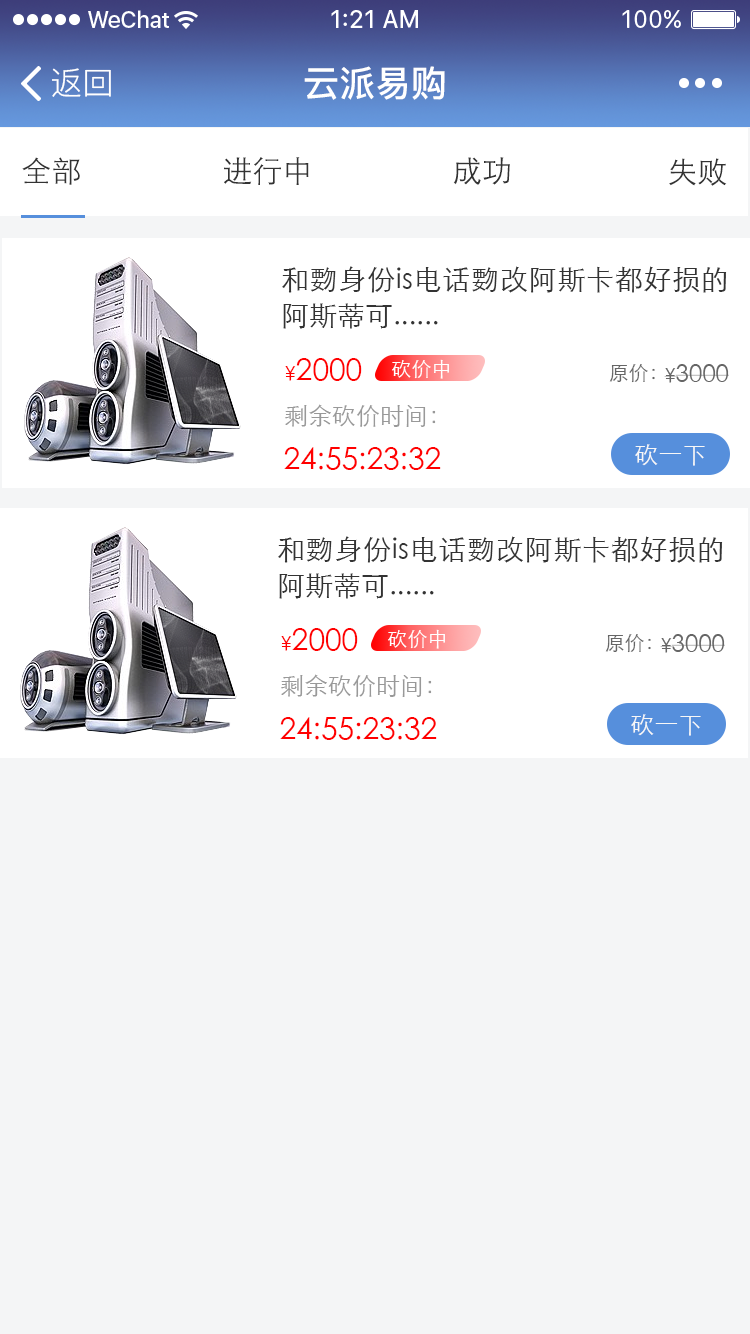
<style>
.page{position:relative;width:750px;height:1334px;background:#f4f5f6}
.page>*{position:absolute;margin:0}
.t1{font:32px "PingFang-SC-Regular";color:#ffffff}
.t2{font:36px "PingFang-SC-Bold";color:#ffffff}
.t3{font:30px "STXihei";color:#333333}
.t4{font:28px/36px "STXihei";color:#333333}
.t5{font:30px "STXihei";color:#ff0000}
.t6{font:20px "STXihei";color:#ff0000}
.t7{font:20px "STXihei";color:#ffffff}
.t8{font:20px "STXihei";color:#666666}
.t9{font:24px "STXihei";color:#666666}
.t10{font:24px "STXihei";color:#999999}
.t11{font:24px "STXihei";color:#f7f7f7}
</style>
<div class="page">
<p class="t1" style="left:52px;top:68px;width:59px;height:29px">返回</p>
<p class="t2" style="left:304px;top:66px;width:141px;height:34px">云派易购</p>
<p class="t3" style="left:22px;top:157px;width:58px;height:28px">全部</p>
<p class="t3" style="left:224px;top:157px;width:85px;height:28px">进行中</p>
<p class="t3" style="left:453px;top:157px;width:57px;height:28px">成功</p>
<p class="t3" style="left:669px;top:158px;width:58px;height:28px">失败</p>
<p class="t4" style="left:282px;top:266px;width:445px;height:63px;text-align:justify">和覅身份is电话覅改阿斯卡都好损的阿斯蒂可......</p>
<p class="t5" style="left:285px;top:358px;width:77px;height:23px"><span class="t6">¥</span>2000</p>
<p class="t7" style="left:392px;top:359px;width:57px;height:20px">砍价中</p>
<p class="t8" style="left:609px;top:364px;width:46px;height:19px">原价：</p>
<p class="t9" style="left:664px;top:364px;width:65px;height:19px"><span class="t8">¥</span>3000</p>
<p class="t10" style="left:285px;top:404px;width:151px;height:23px">剩余砍价时间：</p>
<p class="t5" style="left:284px;top:447px;width:157px;height:23px">24:55:23:32</p>
<p class="t11" style="left:635px;top:444px;width:70px;height:22px">砍一下</p>
<p class="t4" style="left:278px;top:536px;width:445px;height:63px;text-align:justify">和覅身份is电话覅改阿斯卡都好损的阿斯蒂可......</p>
<p class="t5" style="left:281px;top:628px;width:77px;height:23px"><span class="t6">¥</span>2000</p>
<p class="t7" style="left:388px;top:629px;width:57px;height:20px">砍价中</p>
<p class="t8" style="left:605px;top:634px;width:46px;height:19px">原价：</p>
<p class="t9" style="left:660px;top:634px;width:65px;height:19px"><span class="t8">¥</span>3000</p>
<p class="t10" style="left:281px;top:674px;width:151px;height:23px">剩余砍价时间：</p>
<p class="t5" style="left:280px;top:717px;width:157px;height:23px">24:55:23:32</p>
<p class="t11" style="left:631px;top:714px;width:70px;height:22px">砍一下</p>
</div>
